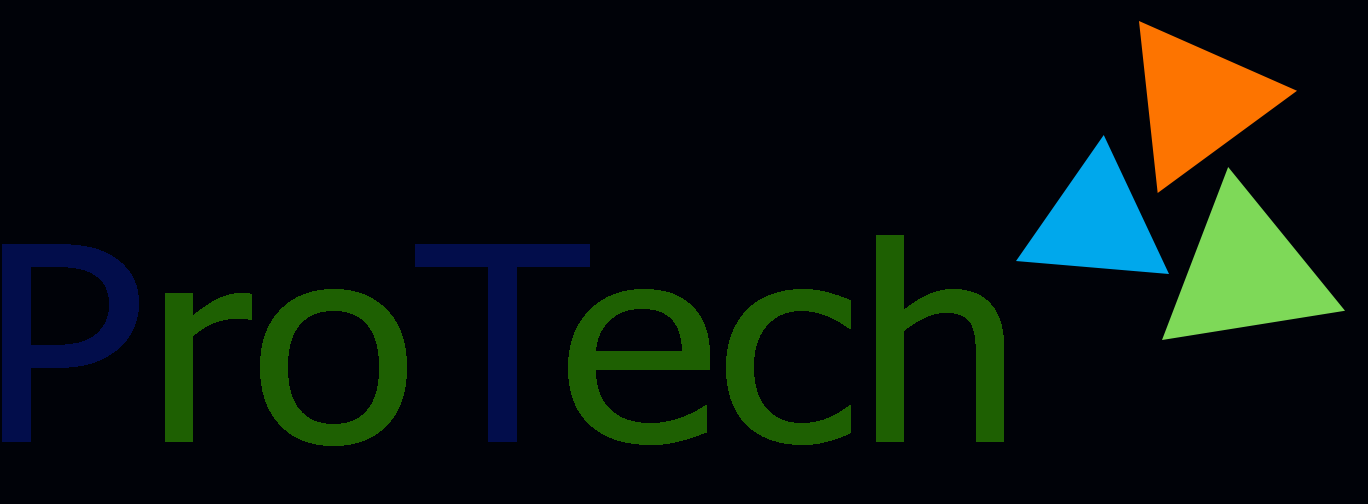
<style>
.page{position:relative;width:1368px;height:504px;background:#000208}
.page>*{position:absolute;margin:0}
.t1{font:272.8px "Tahoma";color:#1e6002;scale:1.1 1}
.t2{font:272.8px "Tahoma";color:#020d4b;scale:1.1 1}
</style>
<div class="page">
<p class="t1" style="left:2px;top:235px;width:1002px;height:211px"><span class="t2">P</span>ro<span class="t2">T</span>ech</p>
</div>
